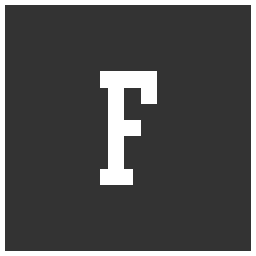
<style>
.page{position:relative;width:256px;height:256px;background:#333333}
.page>*{position:absolute;margin:0}
.t1{font:130px "November";color:#ffffff}
</style>
<div class="page">
<p class="t1" style="left:100px;top:71px;width:57px;height:114px">F</p>
</div>
